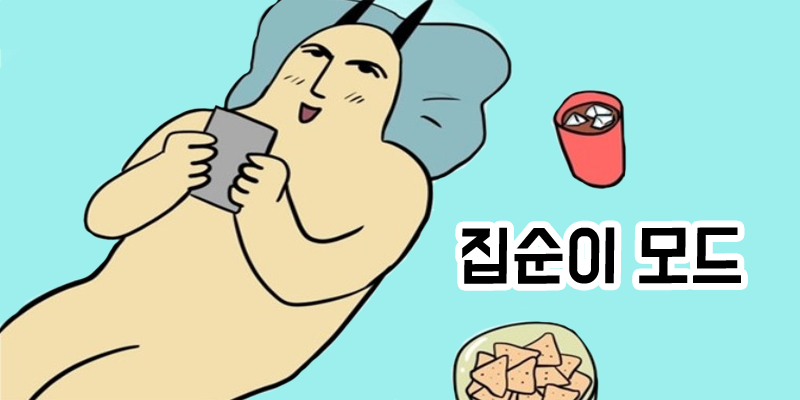
<style>
.page{position:relative;width:800px;height:400px;background:#9defed}
.page>*{position:absolute;margin:0}
.t1{font:59px "BMDoHyeon";color:#000000;scale:0.95 1}
</style>
<div class="page">
<p class="t1" style="left:462px;top:227px;width:279px;height:57px">집순이 모드</p>
</div>
